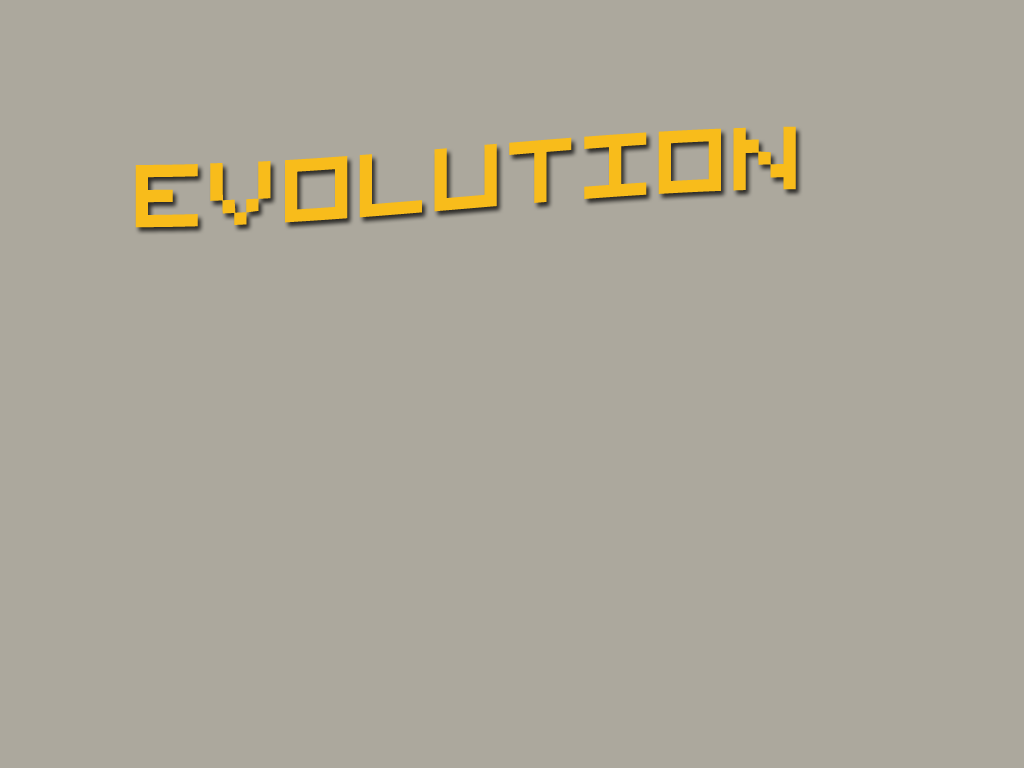
<style>
.page{position:relative;width:1024px;height:768px;background:#aca89d}
.page>*{position:absolute;margin:0}
.t1{font:160px "VisitorTT2BRK";color:#f8bc1b}
</style>
<div class="page">
<p class="t1" style="left:135px;top:126px;width:661px;height:102px">EVOLUTION</p>
</div>
